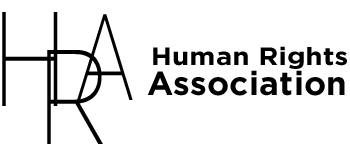
<style>
.page{position:relative;width:350px;height:150px;background:#ffffff}
.page>*{position:absolute;margin:0}
.t1{font:134.1px "Gotham-ExtraLight";letter-spacing:0.01em;color:#000000;scale:0.75 1}
.t2{font:121.7px "Gotham-ExtraLight";letter-spacing:0.01em;color:#000000;scale:0.65 1}
.t3{font:24.9px "Gotham-Bold";letter-spacing:0.01em;color:#000000;scale:1.1 1}
.t4{font:33.3px "Gotham-Bold";letter-spacing:0.01em;color:#000000}
</style>
<div class="page">
<p class="t1" style="left:2px;top:12px;width:56px;height:94px">H</p>
<p class="t2" style="left:77px;top:14px;width:56px;height:86px">A</p>
<p class="t1" style="left:47px;top:50px;width:56px;height:94px">R</p>
<p class="t3" style="left:153px;top:46px;width:194px;height:23px">Human Rights</p>
<p class="t4" style="left:147px;top:70px;width:198px;height:26px">Association</p>
</div>
